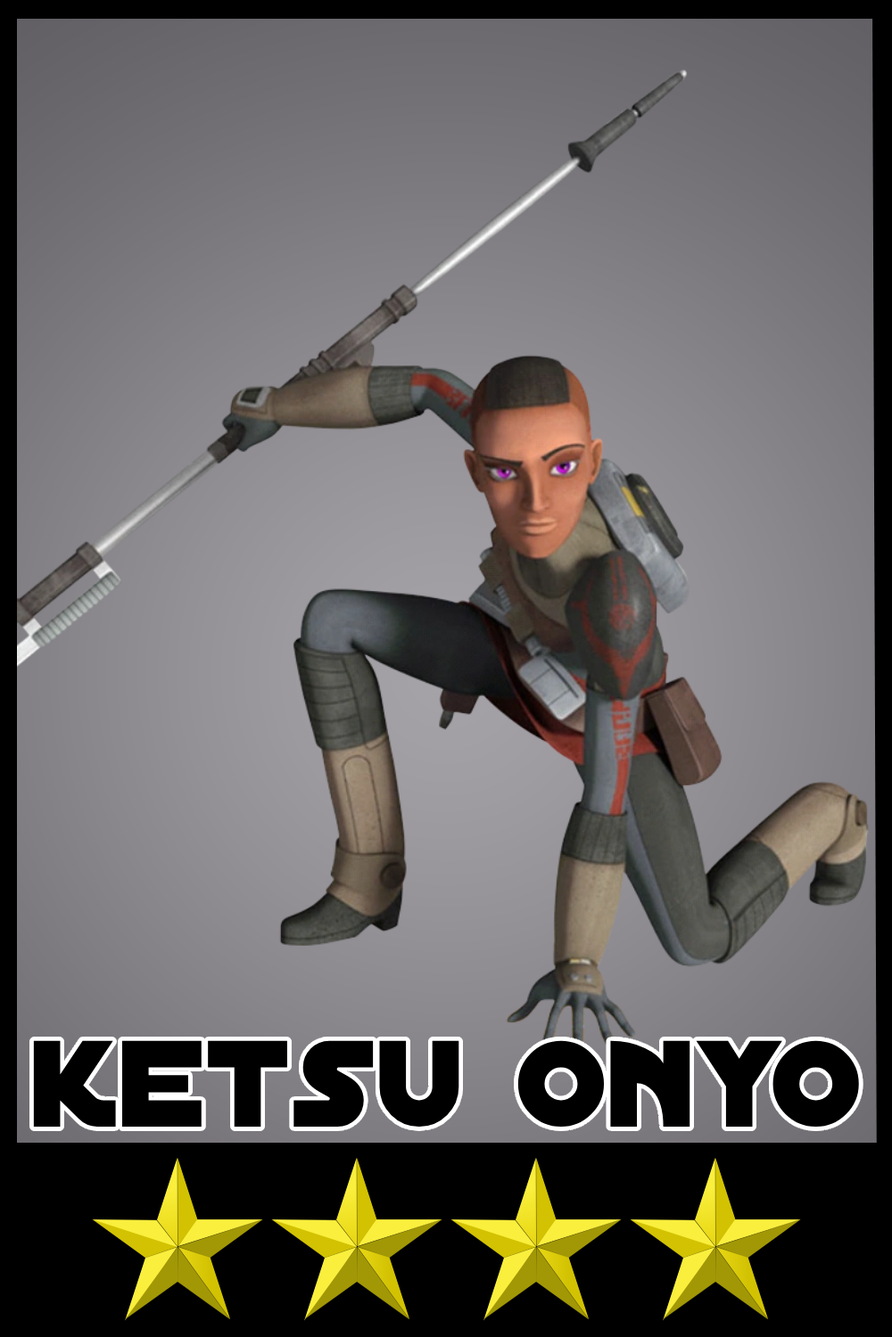
<style>
.page{position:relative;width:892px;height:1337px}
.page>*{position:absolute;margin:0}
.t1{font:131.9px "DistantGalaxy";color:#000000}
</style>
<div class="page">
<p class="t1" style="left:33px;top:1041px;width:826px;height:86px">ketsu onyo</p>
</div>
